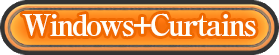
<style>
.page{position:relative;width:279px;height:55px}
.page>*{position:absolute;margin:0}
.t1{font:30px "RyuminPro-ExBold";letter-spacing:-0.08em;color:#fffff7}
</style>
<div class="page">
<p class="t1" style="left:22px;top:13px;width:234px;height:24px">Windows+Curtains</p>
</div>
